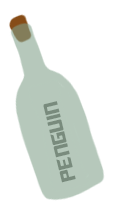
<style>
.page{position:relative;width:130px;height:205px;background:#ffffff}
.page>*{position:absolute;margin:0}
.t1{font:20.4px "Megatron";color:#798b7d}
</style>
<div class="page">
<p class="t1" style="left:43px;top:101px;width:33px;height:82px;rotate:-104deg">penguin</p>
</div>
